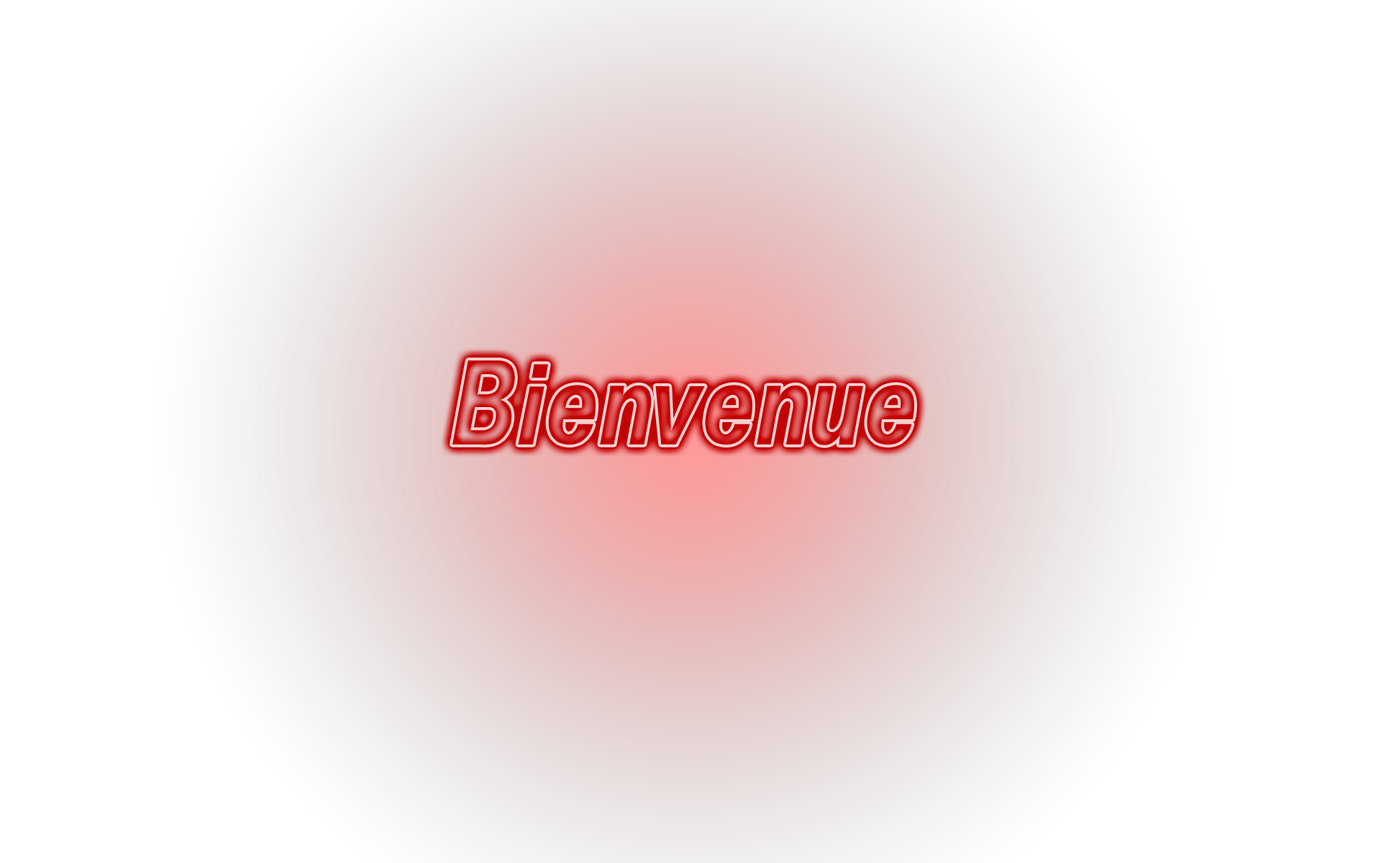
<style>
.page{position:relative;width:1381px;height:863px;background:#ffffff}
.page>*{position:absolute;margin:0}
.t1{font:120.7px "CaracteresL4"}
</style>
<div class="page">
<p class="t1" style="left:453px;top:360px;width:461px;height:85px">Bienvenue</p>
</div>
